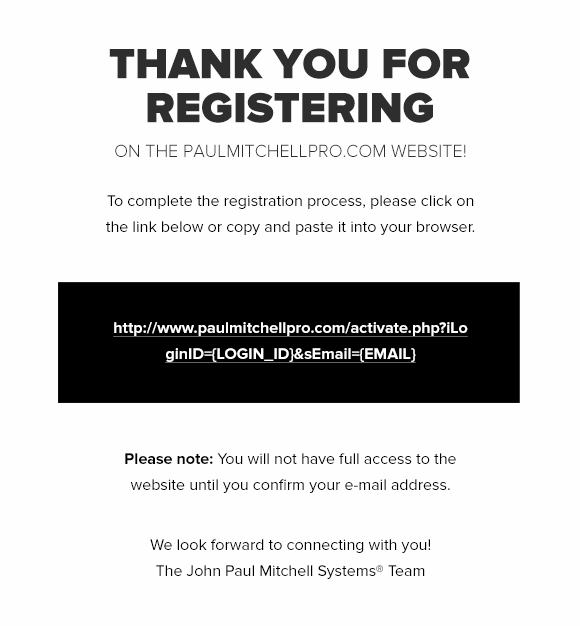
<style>
.page{position:relative;width:580px;height:626px;background:#fffefe}
.page>*{position:absolute;margin:0}
.t1{font:44px/44px "ProximaNova-Black";color:#2e2e2e;text-transform:uppercase}
.t2{font:18px "ProximaNova-Light";color:#2e2e2e;text-transform:uppercase}
.t3{font:16px/26px "ProximaNova-Regular";color:#000000}
.t4{font:16px/26px "ProximaNova-Bold";color:#ffffff;text-decoration:underline}
.t5{font:16px/26px "ProximaNova-Bold";color:#000000}
</style>
<div class="page">
<p class="t1" style="left:109px;top:48px;width:361px;height:75px;text-align:center">Thank you for registering</p>
<p class="t2" style="left:115px;top:144px;width:351px;height:13px">on the paulmitchellpro.com website!</p>
<p class="t3" style="left:106px;top:195px;width:369px;height:40px;text-align:center">To complete the registration process, please click on the link below or copy and paste it into your browser.</p>
<p class="t4" style="left:113px;top:322px;width:355px;height:41px;text-align:center">http://www.paulmitchellpro.com/activate.php?iLoginID={LOGIN_ID}&amp;sEmail={EMAIL}</p>
<p class="t3" style="left:125px;top:453px;width:331px;height:40px;text-align:center"><span class="t5">Please note:</span> You will not have full access to the website until you confirm your e-mail address.</p>
<p class="t3" style="left:150px;top:539px;width:281px;height:40px;text-align:center">We look forward to connecting with you!<br>The John Paul Mitchell Systems® Team</p>
</div>
